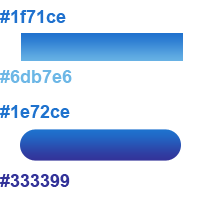
<style>
.page{position:relative;width:200px;height:200px;background:#ffffff}
.page>*{position:absolute;margin:0}
.t1{font:18px "Arial-BoldMT";color:#1f71ce}
.t2{font:18px "Arial-BoldMT";color:#6db7e6}
.t3{font:18px "Arial-BoldMT";color:#1e72ce}
.t4{font:18px "Arial-BoldMT";color:#333399}
</style>
<div class="page">
<p class="t1" style="left:0px;top:10px;width:66px;height:13px">#1f71ce</p>
<p class="t2" style="left:0px;top:70px;width:72px;height:13px">#6db7e6</p>
<p class="t3" style="left:0px;top:105px;width:70px;height:13px">#1e72ce</p>
<p class="t4" style="left:0px;top:174px;width:70px;height:13px">#333399</p>
</div>
